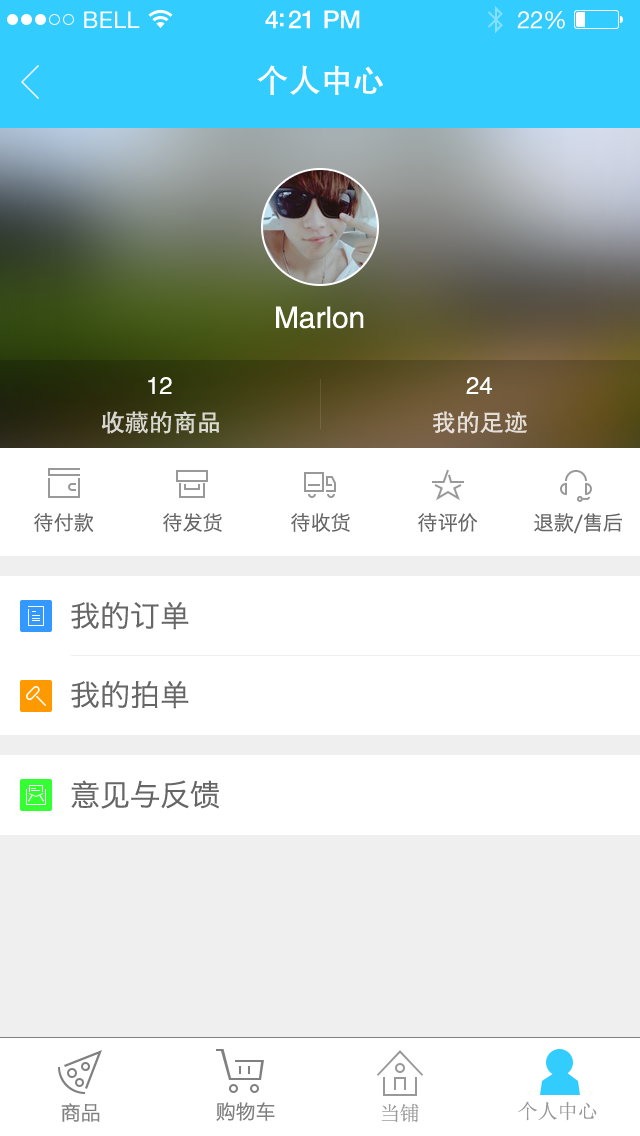
<style>
.page{position:relative;width:640px;height:1136px;background:#ffffff}
.page>*{position:absolute;margin:0}
.t1{font:23px "HelveticaNeue";letter-spacing:0.02em;color:#ffffff}
.t2{font:25px "HelveticaNeue-Medium";letter-spacing:-0.02em;color:#ffffff}
.t3{font:24px "HelveticaNeue";letter-spacing:-0.02em;color:#ffffff}
.t4{font:32px "FZHTJW--GB1-0";color:#ffffff}
.t5{font:30px "FZHTJW--GB1-0";color:#ffffff}
.t6{font:24px "FZHTJW--GB1-0";color:#ffffff}
.t7{font:24px "FZHTJW--GB1-0";color:#d8d8d0}
.t8{font:24px "FZHTJW--GB1-0";color:#e4dfd9}
.t9{font:20px "MingHei_R";color:#666666}
.t10{font:30px "MingHei_R";color:#666666}
.t11{font:20px "MingHei_R";color:#808080}
.t12{font:20px "SimSun";color:#999999}
</style>
<div class="page">
<p class="t1" style="left:84px;top:11px;width:56px;height:17px">BELL</p>
<p class="t2" style="left:265px;top:10px;width:95px;height:19px">4:21 PM</p>
<p class="t3" style="left:517px;top:11px;width:48px;height:18px">22%</p>
<p class="t4" style="left:257px;top:65px;width:126px;height:30px">个人中心</p>
<p class="t5" style="left:276px;top:306px;width:88px;height:23px">Marlon</p>
<p class="t6" style="left:148px;top:377px;width:24px;height:17px">12</p>
<p class="t6" style="left:466px;top:377px;width:26px;height:17px">24</p>
<p class="t7" style="left:101px;top:411px;width:118px;height:23px">收藏的商品</p>
<p class="t8" style="left:433px;top:411px;width:94px;height:23px">我的足迹</p>
<p class="t9" style="left:34px;top:513px;width:60px;height:19px">待付款</p>
<p class="t9" style="left:163px;top:513px;width:59px;height:19px">待发货</p>
<p class="t9" style="left:291px;top:513px;width:59px;height:19px">待收货</p>
<p class="t9" style="left:418px;top:513px;width:60px;height:19px">待评价</p>
<p class="t9" style="left:534px;top:513px;width:88px;height:21px">退款/售后</p>
<p class="t10" style="left:71px;top:602px;width:118px;height:28px">我的订单</p>
<p class="t10" style="left:71px;top:681px;width:118px;height:28px">我的拍单</p>
<p class="t10" style="left:71px;top:780px;width:148px;height:29px">意见与反馈</p>
<p class="t11" style="left:61px;top:1103px;width:39px;height:19px">商品</p>
<p class="t11" style="left:216px;top:1102px;width:59px;height:19px">购物车</p>
<p class="t12" style="left:381px;top:1103px;width:38px;height:19px">当铺</p>
<p class="t12" style="left:518px;top:1101px;width:79px;height:20px">个人中心</p>
</div>
